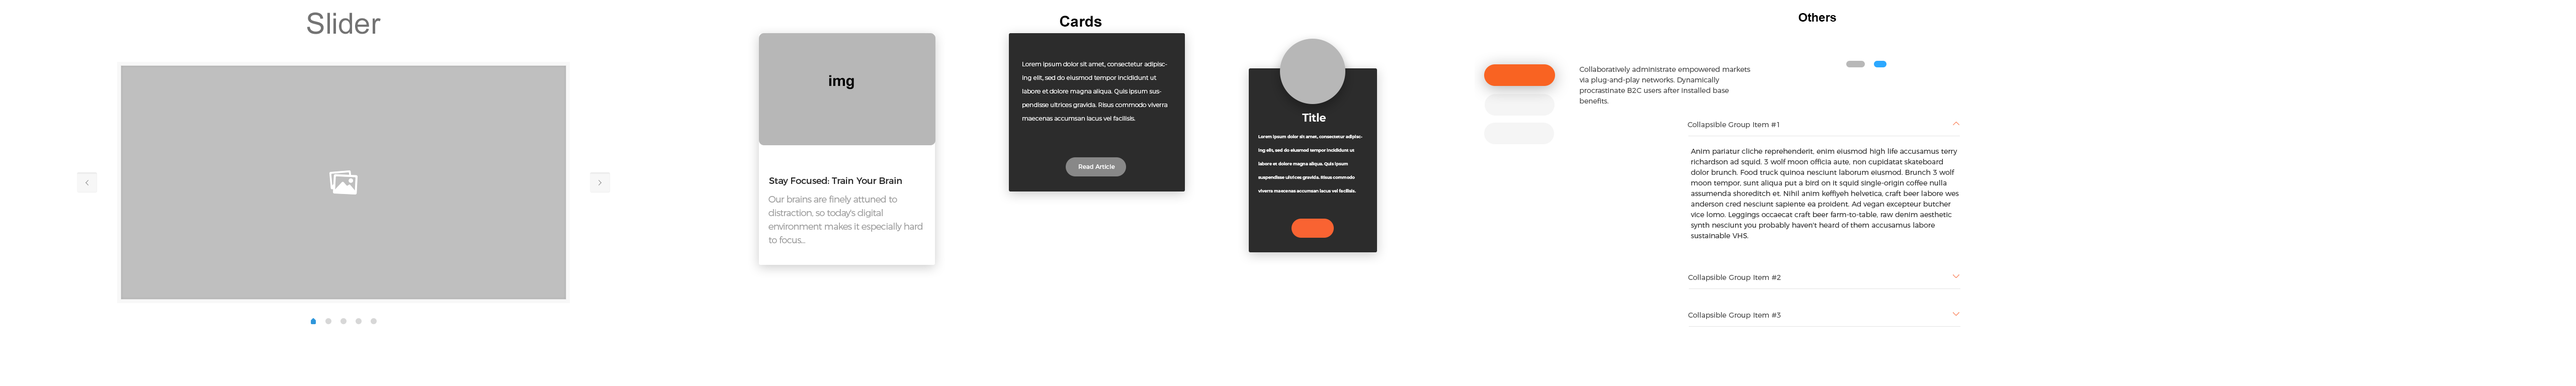
<style>
.page{position:relative;width:2576px;height:386px;background:#ffffff}
.page>*{position:absolute;margin:0}
.t1{font:29.1px "ArialMT";color:#737373}
.t2{font:15.1px "Arial-BoldMT";color:#000000}
.t3{font:12.1px "Arial-BoldMT";letter-spacing:-0.01em;color:#000000}
.t4{font:6px/13.6px "Montserrat-Regular";letter-spacing:-0.01em;color:#ffffff}
.t5{font:7.1px/10.6px "Montserrat-Light";color:#444444}
.t6{font:10.9px "Montserrat-Bold";letter-spacing:-0.01em;color:#ffffff;scale:0.97 1}
.t7{font:7px "Montserrat-Light";letter-spacing:0.01em;color:#444444}
.t8{font:4.1px/13.6px "Montserrat-Bold";letter-spacing:-0.01em;color:#ffffff}
.t9{font:7px/10.6px "Montserrat-Light";letter-spacing:0.005em;color:#2c2c2c}
.t10{font:7px/1px "Montserrat-Light";letter-spacing:0.005em;color:#2c2c2c}
.t11{font:6px "Montserrat-Regular";letter-spacing:-0.01em;color:#ffffff}
.t12{font:9.1px "Montserrat-Regular";letter-spacing:-0.01em;color:#2c2c2c}
.t13{font:9.1px/13.6px "Montserrat-Light";letter-spacing:-0.038em;color:#9a9a9a}
.t14{font:7.2px "Montserrat-Light";letter-spacing:0.01em;color:#444444}
</style>
<div class="page">
<p class="t1" style="left:307px;top:12px;width:74px;height:22px">Slider</p>
<p class="t2" style="left:1060px;top:16px;width:42px;height:11px">Cards</p>
<p class="t3" style="left:1798px;top:13px;width:38px;height:9px">Others</p>
<p class="t4" style="left:1022px;top:62px;width:145px;height:59px">Lorem ipsum dolor sit amet, consectetur adipiscing elit, sed do eiusmod tempor incididunt ut labore et dolore magna aliqua. Quis ipsum suspendisse ultrices gravida. Risus commodo viverra maecenas accumsan lacus vel facilisis.</p>
<p class="t2" style="left:829px;top:75px;width:25px;height:15px">img</p>
<p class="t5" style="left:1579px;top:66px;width:171px;height:38px">Collaboratively administrate empowered markets<br>via plug-and-play networks. Dynamically <br>procrastinate B2C users after installed base <br>benefits.</p>
<p class="t6" style="left:1302px;top:113px;width:24px;height:9px">Title</p>
<p class="t7" style="left:1688px;top:122px;width:91px;height:7px">Collapsible Group Item #1</p>
<p class="t8" style="left:1258px;top:135px;width:104px;height:58px">Lorem ipsum dolor sit amet, consectetur adipiscing elit, sed do eiusmod tempor incididunt ut labore et dolore magna aliqua. Quis ipsum suspendisse ultrices gravida. Risus commodo viverra maecenas accumsan lacus vel facilisis.</p>
<p class="t9" style="left:1691px;top:148px;width:268px;height:90px"><span class="t10">Anim pariatur cliche reprehenderit, enim eiusmod high life accusamus terry <br></span>richardson ad squid. 3 wolf moon officia aute, non cupidatat skateboard <br>dolor brunch. Food truck quinoa nesciunt laborum eiusmod. Brunch 3 wolf <br>moon tempor, sunt aliqua put a bird on it squid single-origin coffee nulla <br>assumenda shoreditch et. Nihil anim keffiyeh helvetica, craft beer labore wes <br>anderson cred nesciunt sapiente ea proident. Ad vegan excepteur butcher <br>vice lomo. Leggings occaecat craft beer farm-to-table, raw denim aesthetic <br>synth nesciunt you probably haven't heard of them accusamus labore <br>sustainable VHS.</p>
<p class="t11" style="left:1079px;top:164px;width:36px;height:5px">Read Article</p>
<p class="t12" style="left:769px;top:177px;width:133px;height:9px">Stay Focused: Train Your Brain</p>
<p class="t13" style="left:768px;top:196px;width:154px;height:47px">Our brains are finely attuned to <br>distraction, so today's digital <br>environment makes it especially hard <br>to focus...</p>
<p class="t14" style="left:1688px;top:275px;width:93px;height:7px">Collapsible Group Item #2</p>
<p class="t14" style="left:1688px;top:312px;width:93px;height:7px">Collapsible Group Item #3</p>
</div>
